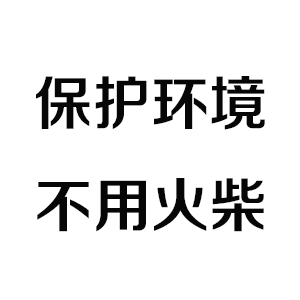
<style>
.page{position:relative;width:300px;height:300px;background:#ffffff}
.page>*{position:absolute;margin:0}
.t1{font:58.3px "FZZZHONGJW--GB1-0";color:#060606;text-transform:uppercase}
</style>
<div class="page">
<p class="t1" style="left:36px;top:76px;width:229px;height:156px;text-align:center">保护环境<br>不用火柴</p>
</div>
